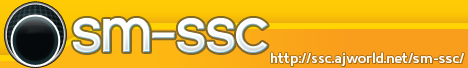
<style>
.page{position:relative;width:468px;height:68px}
.page>*{position:absolute;margin:0}
.t1{font:60px "Florencesans-Bold";letter-spacing:-0.075em;color:#ffffff}
.t2{font:14px "Mentone-SemiBold";letter-spacing:-0.01em;color:#ffffff}
</style>
<div class="page">
<p class="t1" style="left:73px;top:18px;width:195px;height:35px">sm-ssc</p>
<p class="t2" style="left:271px;top:52px;width:193px;height:14px">http://ssc.ajworld.net/sm-ssc/</p>
</div>
